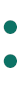
<style>
.page{position:relative;width:20px;height:88px;background:#ffffff}
.page>*{position:absolute;margin:0}
.t1{font:90px "ChiaroStd-B";color:#0d7265}
</style>
<div class="page">
<p class="t1" style="left:3px;top:20px;width:14px;height:48px">：</p>
</div>
